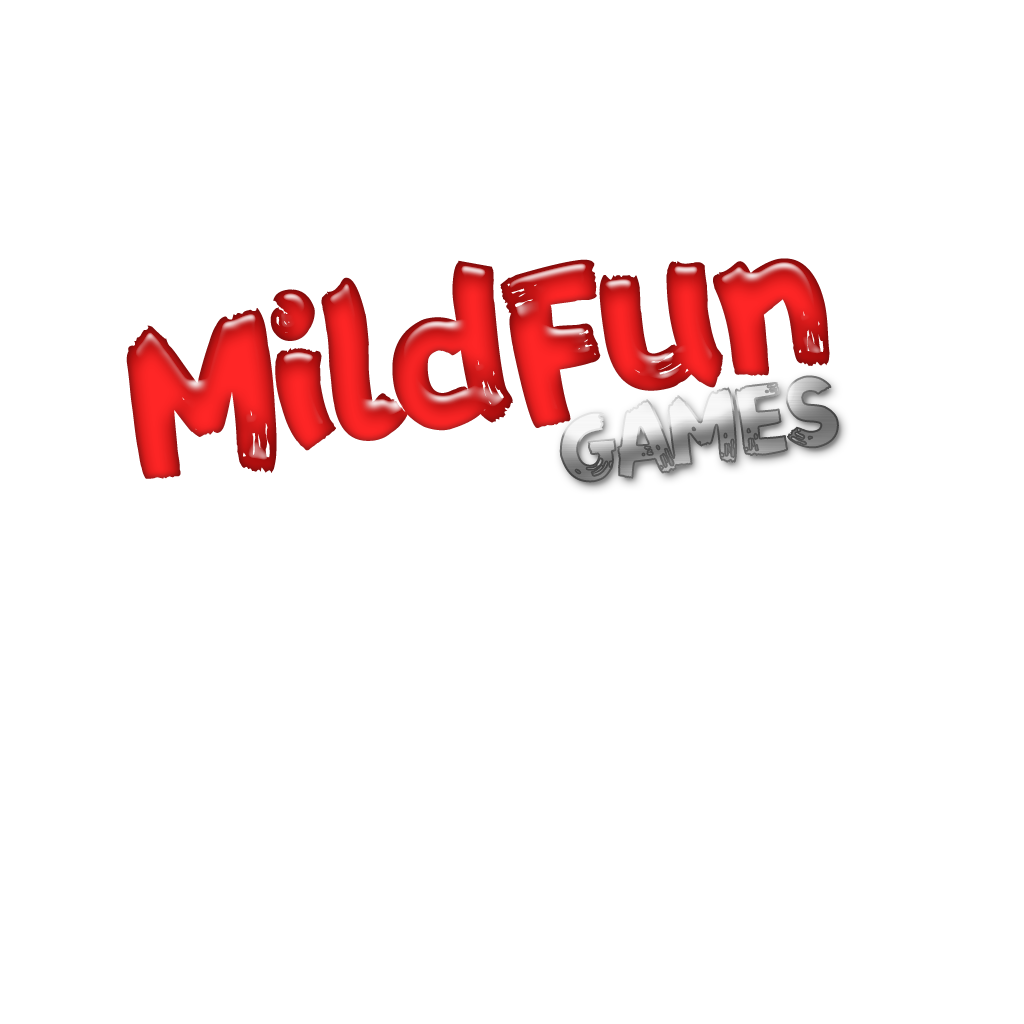
<style>
.page{position:relative;width:1024px;height:1024px;background:#ffffff}
.page>*{position:absolute;margin:0}
.t1{font:194px "FZFENSTXJW--GB1-0";letter-spacing:-0.08em}
.t2{font:90px "FZFENSTXJW--GB1-0";letter-spacing:-0.08em}
</style>
<div class="page">
<p class="t1" style="left:126px;top:258px;width:704px;height:221px;rotate:-9deg">MildFun</p>
<p class="t2" style="left:559px;top:375px;width:280px;height:108px;rotate:-9deg">GAMES</p>
</div>
